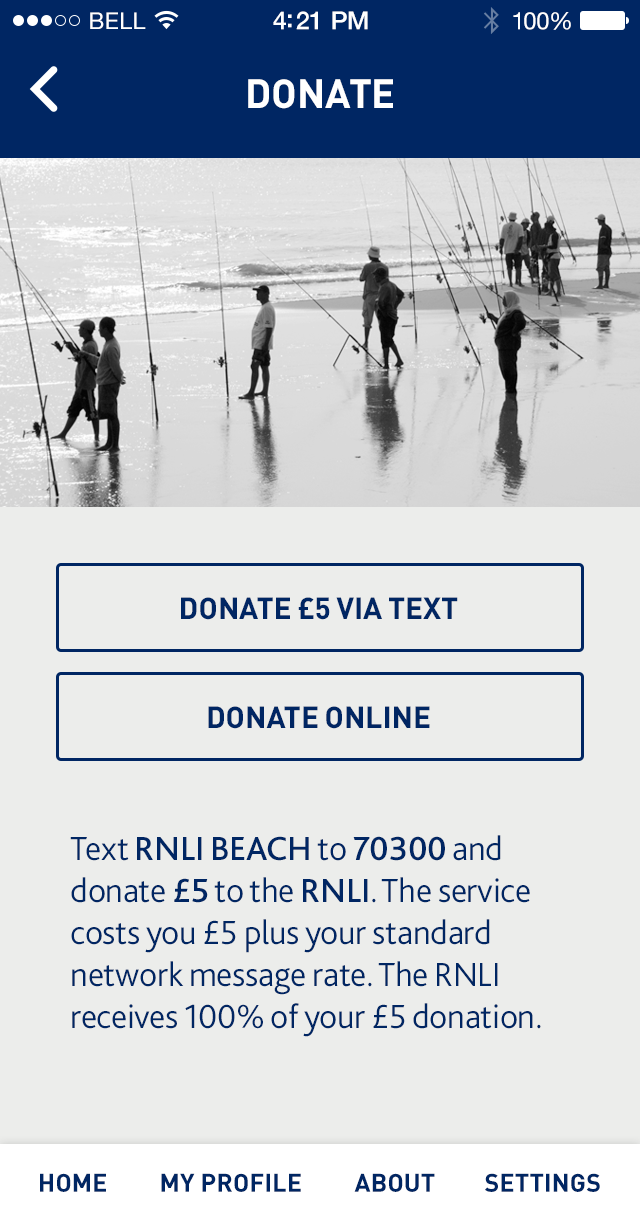
<style>
.page{position:relative;width:640px;height:1222px;background:#ecedeb}
.page>*{position:absolute;margin:0}
.t1{font:23px "HelveticaNeue";letter-spacing:0.02em;color:#ffffff}
.t2{font:25px "HelveticaNeue-Medium";letter-spacing:-0.02em;color:#ffffff}
.t3{font:24px "HelveticaNeue";letter-spacing:-0.02em;color:#ffffff}
.t4{font:40px "DIN-Bold";color:#ffffff;text-transform:uppercase}
.t5{font:30px "DIN-Bold";color:#002663;text-transform:uppercase}
.t6{font:35px "Bliss2-Light";letter-spacing:-0.01em;color:#002663}
.t7{font:35px "Bliss2-Medium";letter-spacing:-0.01em;color:#002663}
.t8{font:25px "DIN-Bold";letter-spacing:0.01em;color:#002663;text-transform:uppercase}
</style>
<div class="page">
<p class="t1" style="left:90px;top:12px;width:56px;height:17px">BELL</p>
<p class="t2" style="left:273px;top:11px;width:95px;height:19px">4:21 PM</p>
<p class="t3" style="left:513px;top:12px;width:58px;height:18px">100%</p>
<p class="t4" style="left:248px;top:79px;width:145px;height:30px">donate</p>
<p class="t5" style="left:181px;top:597px;width:277px;height:23px">donate £5 via text</p>
<p class="t5" style="left:208px;top:706px;width:222px;height:23px">donate online</p>
<p class="t6" style="left:70px;top:835px;width:471px;height:202px">Text <span class="t7">RNLI BEACH</span> to <span class="t7">70300 </span>and donate <span class="t7">£5</span> to the <span class="t7">RNLI</span>. The service costs you £5 plus your standard network message rate. The RNLI receives 100% of your £5 donation.</p>
<p class="t8" style="left:40px;top:1173px;width:66px;height:19px">Home</p>
<p class="t8" style="left:161px;top:1173px;width:140px;height:19px">My Profile</p>
<p class="t8" style="left:354px;top:1173px;width:81px;height:19px">About</p>
<p class="t8" style="left:485px;top:1173px;width:115px;height:19px">Settings</p>
</div>
